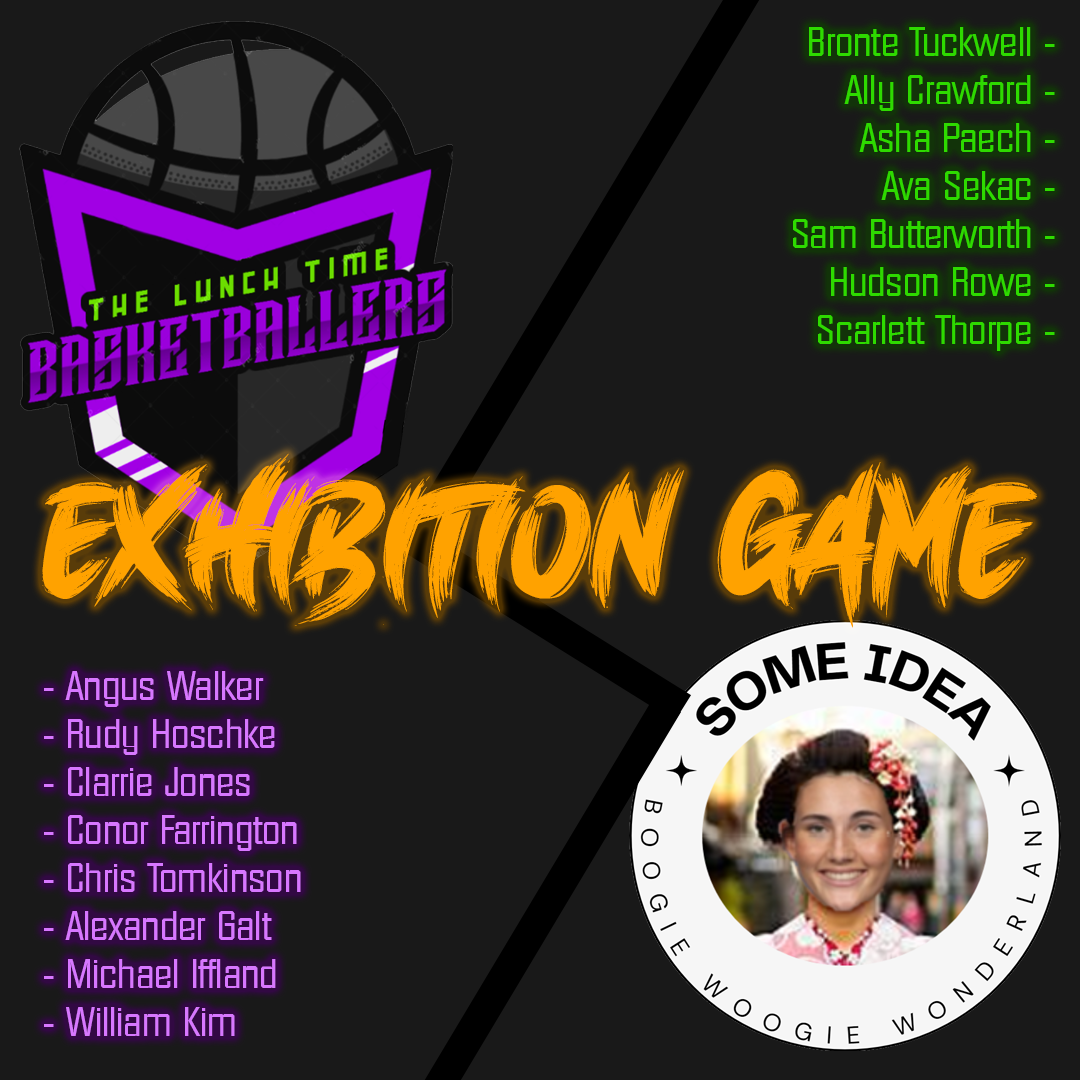
<style>
.page{position:relative;width:1080px;height:1080px;background:#191919}
.page>*{position:absolute;margin:0}
.t1{font:40px "Diamante-Serial-Regular";color:#2eda00}
.t2{font:80px "BrushKing";color:#ffa200}
.t3{font:40px "Diamante-Serial-Regular";color:#d777ff}
</style>
<div class="page">
<p class="t1" style="left:793px;top:27px;width:262px;height:324px;text-align:right">Bronte Tuckwell -<br>Ally Crawford -<br>Asha Paech -<br>Ava Sekac -<br>Sam Butterworth -<br>Hudson Rowe -<br>Scarlett Thorpe -</p>
<p class="t2" style="left:42px;top:453px;width:996px;height:175px;text-align:center">Exhibition Game</p>
<p class="t3" style="left:44px;top:671px;width:257px;height:365px">- Angus Walker<br>- Rudy Hoschke<br>- Clarrie Jones<br>- Conor Farrington<br>- Chris Tomkinson<br>- Alexander Galt<br>- Michael Iffland<br>- William Kim</p>
</div>
